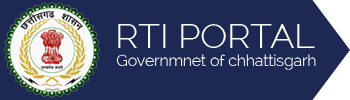
<style>
.page{position:relative;width:350px;height:100px;background:#1d2953}
.page>*{position:absolute;margin:0}
.t1{font:33.3px "Raleway-Light";color:#ffffff;scale:1.07 1}
.t2{font:14.5px "Raleway-Light";color:#ffffff;scale:1.08 1}
</style>
<div class="page">
<p class="t1" style="left:118px;top:24px;width:197px;height:24px">RTI PORTAL</p>
<p class="t2" style="left:116px;top:54px;width:200px;height:16px">Governmnet of chhattisgarh</p>
</div>
